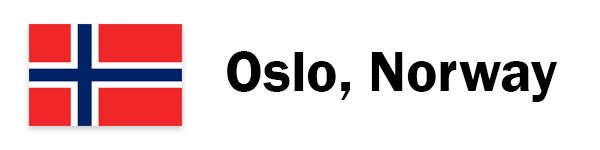
<style>
.page{position:relative;width:600px;height:150px;background:#ffffff}
.page>*{position:absolute;margin:0}
.t1{font:58.9px "FranklinGothic-Demi";color:#000000}
</style>
<div class="page">
<p class="t1" style="left:227px;top:51px;width:331px;height:51px">Oslo, Norway</p>
</div>
